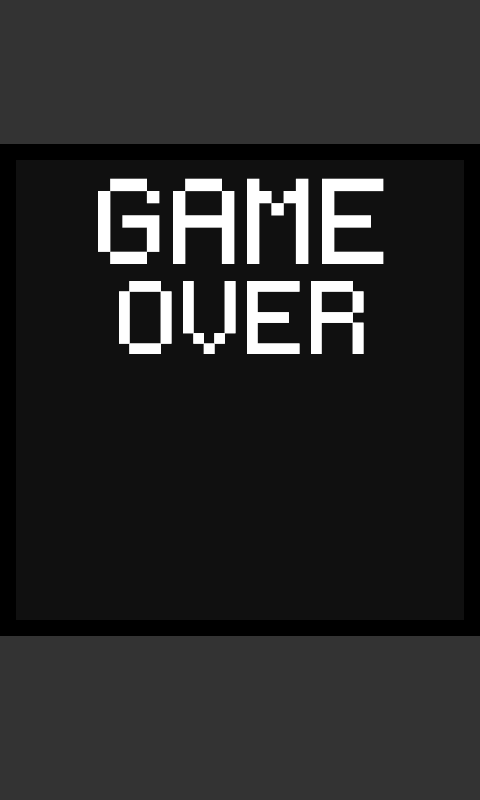
<style>
.page{position:relative;width:480px;height:800px;background:#101010}
.page>*{position:absolute;margin:0}
.t1{font:194.6px "Coder's-Crux";color:#ffffff}
.t2{font:166.6px "Coder's-Crux";color:#ffffff}
</style>
<div class="page">
<p class="t1" style="left:98px;top:178px;width:286px;height:86px">GAME</p>
<p class="t2" style="left:119px;top:281px;width:245px;height:73px">OVER</p>
<p class="t2" style="left:119px;top:281px;width:245px;height:73px">OVER</p>
</div>
